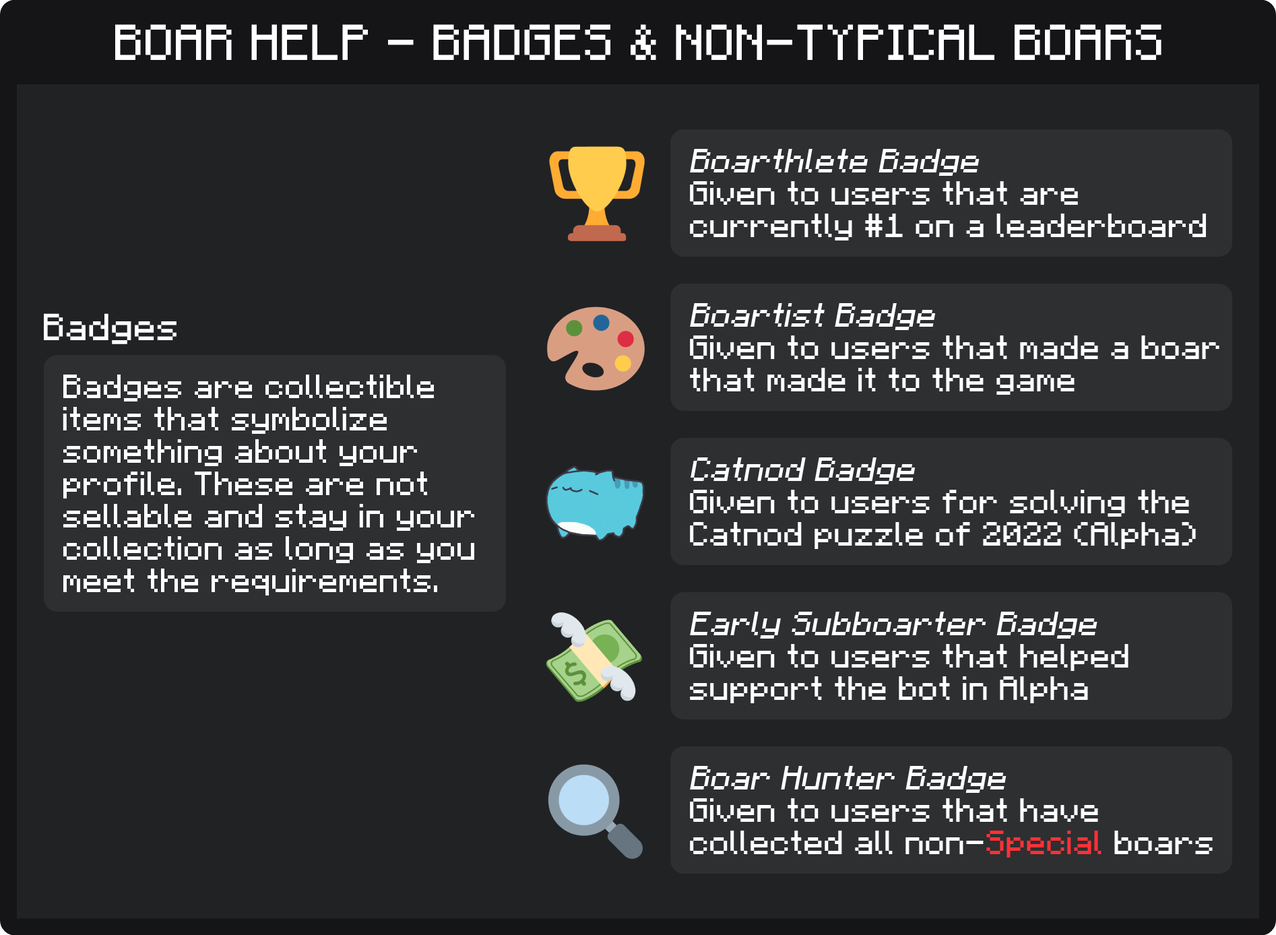
<style>
.page{position:relative;width:1276px;height:935px;background:#212224}
.page>*{position:absolute;margin:0}
.t1{font:40.4px "F77-Minecraft";color:#ffffff}
.t2{font:26.9px "F77-Minecraft";color:#ffffff}
.t3{font:26.9px "F77-Minecraft";color:#ffffff;font-style:italic}
.t4{font:30.3px "F77-Minecraft";color:#ffffff}
.t5{font:26.9px "F77-Minecraft";color:#ff3136}
</style>
<div class="page">
<p class="t1" style="left:115px;top:24px;width:1046px;height:36px">BOAR HELP - BADGES &amp; NON-TYPICAL BOARS</p>
<p class="t2" style="left:690px;top:149px;width:516px;height:91px"><span class="t3">Boarthlete Badge<br></span>Given to users that are<br>currently #1 on a leaderboard</p>
<p class="t2" style="left:690px;top:303px;width:529px;height:92px"><span class="t3">Boartist Badge<br></span>Given to users that made a boar <br>that made it to the game</p>
<p class="t4" style="left:44px;top:313px;width:132px;height:31px">Badges</p>
<p class="t2" style="left:63px;top:374px;width:411px;height:221px">Badges are collectible <br>items that symbolize<br>something about your<br>profile. These are not<br>sellable and stay in your<br>collection as long as you<br>meet the requirements.</p>
<p class="t2" style="left:690px;top:457px;width:505px;height:92px"><span class="t3">Catnod Badge<br></span>Given to users for solving the<br>Catnod puzzle of 2022 (Alpha)</p>
<p class="t2" style="left:690px;top:612px;width:438px;height:91px"><span class="t3">Early Subboarter Badge<br></span>Given to users that helped<br>support the bot in Alpha</p>
<p class="t2" style="left:690px;top:766px;width:522px;height:91px"><span class="t3">Boar Hunter Badge<br></span>Given to users that have<br>collected all non-<span class="t5">Special</span> boars</p>
</div>
